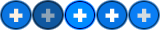
<style>
.page{position:relative;width:160px;height:30px}
.page>*{position:absolute;margin:0}
.t1{font:24px "Herald";color:#fdf1e1}
.t2{font:24px "Herald";color:#8da3b6}
.t3{font:24px "Herald";color:#fffffa}
.t4{font:24px "Herald";color:#fefefd}
.t5{font:24px "Herald";color:#d3dbe1}
</style>
<div class="page">
<p class="t1" style="left:9px;top:8px;width:14px;height:14px">+</p>
<p class="t2" style="left:41px;top:8px;width:14px;height:14px">+</p>
<p class="t3" style="left:73px;top:8px;width:14px;height:14px">+</p>
<p class="t4" style="left:105px;top:8px;width:14px;height:14px">+</p>
<p class="t5" style="left:137px;top:8px;width:14px;height:14px">+</p>
</div>
